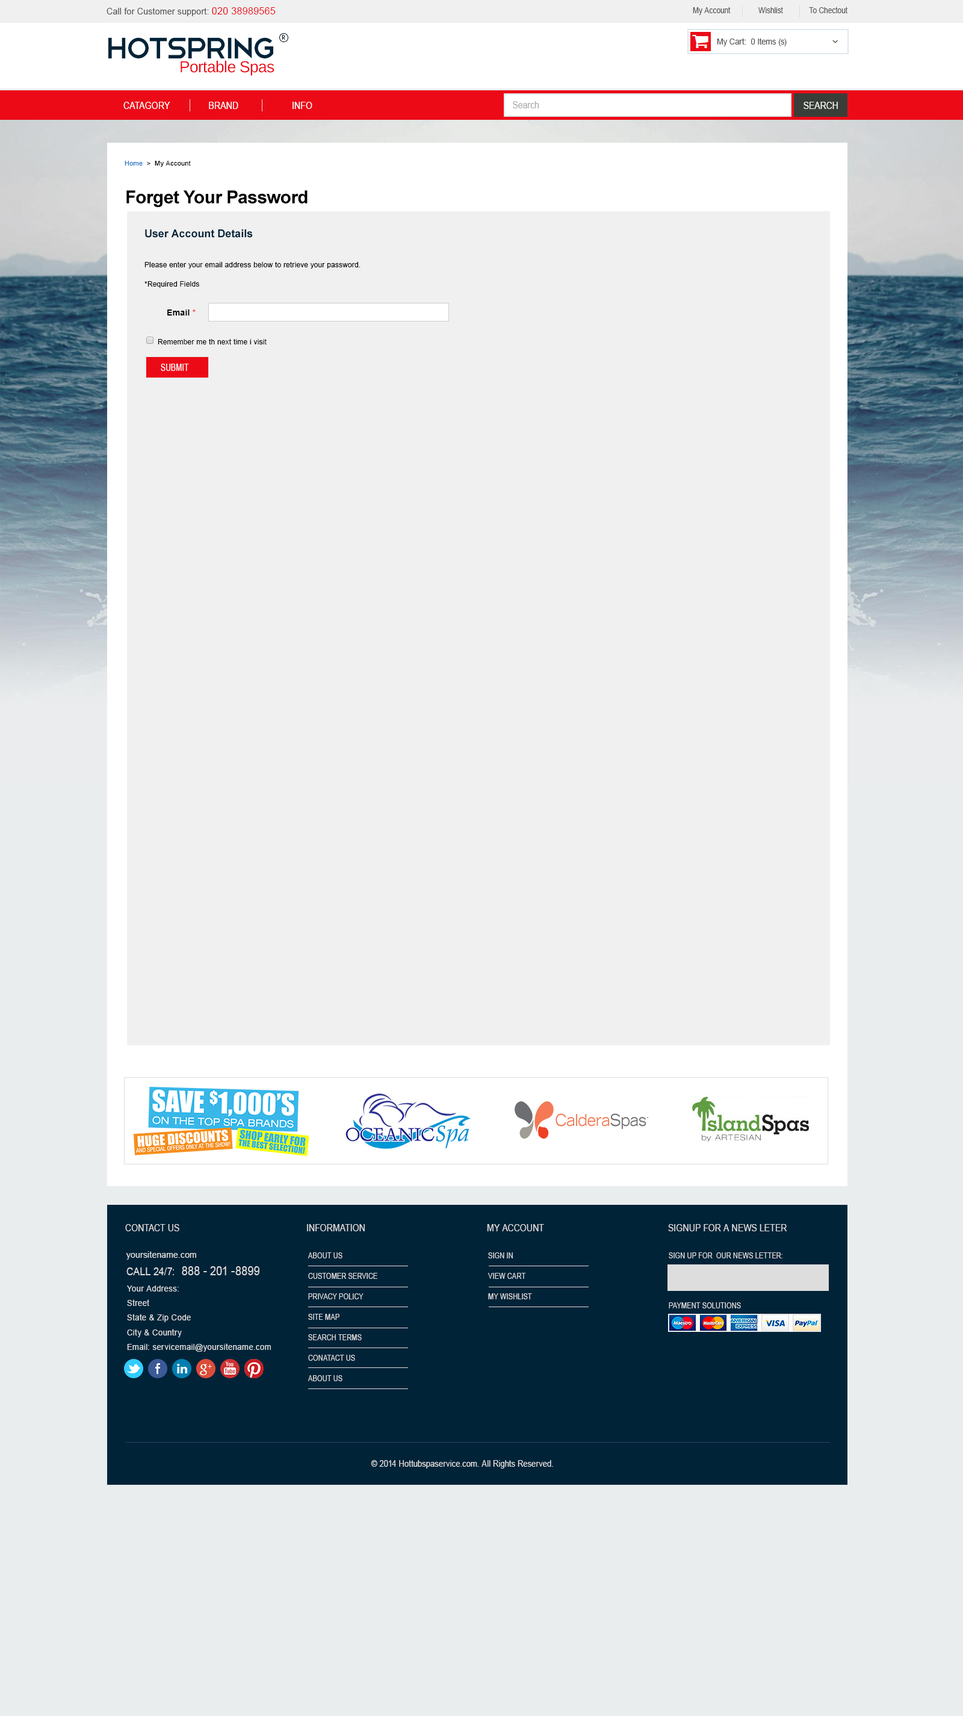
<style>
.page{position:relative;width:963px;height:1716px;background:#f0f0f0}
.page>*{position:absolute;margin:0}
.t1{font:8.8px "ArialMT";letter-spacing:0.02em;color:#555555;scale:0.95 1}
.t2{font:10.1px "ArialMT";letter-spacing:0.02em;color:#ec0a17;scale:0.95 1}
.t3{font:8.3px "ArialMT";color:#555555;scale:0.87 1}
.t4{font:38.6px "Telegrafico";letter-spacing:-0.08em;color:#012338}
.t5{font:6.4px "HarmoniaSansStd-Regular";letter-spacing:0.03em;color:#012338}
.t6{font:8.2px "ArialMT";color:#555555;scale:0.95 1}
.t7{font:15.9px "LiberationSans";letter-spacing:-0.02em;color:#ec0a17}
.t8{font:9.7px "ArialMT";letter-spacing:0.01em;color:#ffffff;scale:0.87 1}
.t9{font:9.7px "ArialMT";color:#aeaba9;scale:0.87 1}
.t10{font:9.7px "ArialMT";color:#ffffff;scale:0.87 1}
.t11{font:6.6px "ArialMT";letter-spacing:0.02em;color:#000000}
.t12{font:6.6px "ArialMT";letter-spacing:0.02em;color:#1d70c0}
.t13{font:18.1px "Arial-BoldMT";letter-spacing:-0.02em;color:#000000}
.t14{font:10.8px "Arial-BoldMT";color:#012338}
.t15{font:7.2px "ArialMT";letter-spacing:0.02em;color:#000000}
.t16{font:8.4px "Arial-BoldMT";letter-spacing:0.02em;color:#000000}
.t17{font:8.4px "Arial-BoldMT";letter-spacing:0.02em;color:#f92834}
.t18{font:9.9px "ArialMT";color:#ffffff;text-transform:uppercase;scale:0.75 1}
.t19{font:9.7px "ArialMT";letter-spacing:0.01em;color:#dddddd;scale:0.87 1}
.t20{font:9.2px "ArialMT";letter-spacing:0.03em;color:#dddddd;scale:0.9 1}
.t21{font:7.6px/20.5px "ArialMT";letter-spacing:0.01em;color:#dddddd;scale:0.87 1}
.t22{font:7.6px "ArialMT";letter-spacing:0.01em;color:#dddddd;scale:0.87 1}
.t23{font:12.5px "ArialMT";letter-spacing:0.01em;color:#dddddd;scale:0.87 1}
.t24{font:11.1px "ArialMT";letter-spacing:0.01em;color:#dddddd;scale:0.87 1}
.t25{font:8.5px/14.5px "ArialMT";letter-spacing:0.03em;color:#dddddd;scale:0.94 1}
.t26{font:9px "ArialMT";letter-spacing:0.01em;color:#dddddd;scale:0.87 1}
</style>
<div class="page">
<p class="t1" style="left:107px;top:7px;width:169px;height:9px">Call for Customer support: <span class="t2">020 38989565</span></p>
<p class="t3" style="left:693px;top:7px;width:155px;height:8px">My Account              Wishlist             To Chectout</p>
<p class="t4" style="left:108px;top:37px;width:165px;height:21px">HotSpring</p>
<p class="t5" style="left:282px;top:35px;width:3px;height:5px">R</p>
<p class="t6" style="left:717px;top:38px;width:70px;height:8px">My Cart:  0 Items (s)</p>
<p class="t7" style="left:181px;top:60px;width:94px;height:16px">Portable Spas</p>
<p class="t8" style="left:123px;top:102px;width:189px;height:7px">CATAGORY                BRAND                      INFO</p>
<p class="t9" style="left:513px;top:101px;width:26px;height:7px">Search</p>
<p class="t10" style="left:804px;top:102px;width:34px;height:7px">SEARCH</p>
<p class="t11" style="left:125px;top:161px;width:66px;height:6px"><span class="t12">Home </span> &gt;  My Account</p>
<p class="t13" style="left:126px;top:190px;width:182px;height:17px">Forget Your Password</p>
<p class="t14" style="left:145px;top:229px;width:108px;height:9px">User Account Details</p>
<p class="t15" style="left:144px;top:262px;width:217px;height:6px">Please enter your email address below to retrieve your password.</p>
<p class="t15" style="left:144px;top:281px;width:55px;height:7px">*Required Fields</p>
<p class="t16" style="left:167px;top:309px;width:29px;height:6px">Email <span class="t17">*</span></p>
<p class="t15" style="left:158px;top:339px;width:109px;height:5px">Remember me th next time i visit</p>
<p class="t18" style="left:161px;top:364px;width:28px;height:7px">Submit</p>
<p class="t19" style="left:125px;top:1224px;width:54px;height:7px">CONTACT US</p>
<p class="t19" style="left:307px;top:1224px;width:58px;height:7px">INFORMATION</p>
<p class="t19" style="left:487px;top:1224px;width:57px;height:7px">MY ACCOUNT</p>
<p class="t19" style="left:668px;top:1224px;width:119px;height:7px">SIGNUP FOR A NEWS LETER</p>
<p class="t20" style="left:126px;top:1251px;width:70px;height:8px">yoursitename.com</p>
<p class="t21" style="left:308px;top:1252px;width:69px;height:129px;text-align:justify">ABOUT US<br>CUSTOMER SERVICE<br>PRIVACY POLICY <br>SITE MAP<br>SEARCH TERMS<br>CONATACT US<br>ABOUT US</p>
<p class="t21" style="left:488px;top:1252px;width:44px;height:47px;text-align:justify">SIGN IN<br>VIEW CART<br>MY WISHLIST</p>
<p class="t22" style="left:669px;top:1252px;width:114px;height:6px">SIGN UP FOR  OUR NEWS LETTER:</p>
<p class="t23" style="left:126px;top:1266px;width:133px;height:9px"><span class="t24">CALL 24/7:  </span>888 - 201 -8899</p>
<p class="t25" style="left:127px;top:1285px;width:144px;height:67px;text-align:justify">Your Address:<br>Street<br>State &amp; Zip Code<br>City &amp; Country <br>Email: servicemail@yoursitename.com</p>
<p class="t22" style="left:669px;top:1302px;width:72px;height:6px">PAYMENT SOLUTIONS</p>
<p class="t26" style="left:371px;top:1460px;width:182px;height:8px">© 2014 Hottubspaservice.com. All Rights Reserved.</p>
</div>
